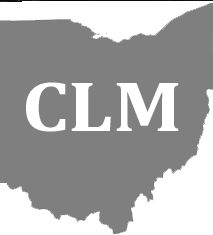
<style>
.page{position:relative;width:213px;height:235px;background:#7f7f7f}
.page>*{position:absolute;margin:0}
.t1{font:72px "Cambria-Bold";color:#ffffff;scale:1.13 1}
</style>
<div class="page">
<p class="t1" style="left:26px;top:81px;width:153px;height:50px">CLM</p>
</div>
